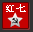
<style>
.page{position:relative;width:33px;height:32px;background:#c50000}
.page>*{position:absolute;margin:0}
.t1{font:10.4px "SimSun";color:#ffffff}
</style>
<div class="page">
<p class="t1" style="left:6px;top:4px;width:20px;height:8px">红七</p>
</div>
